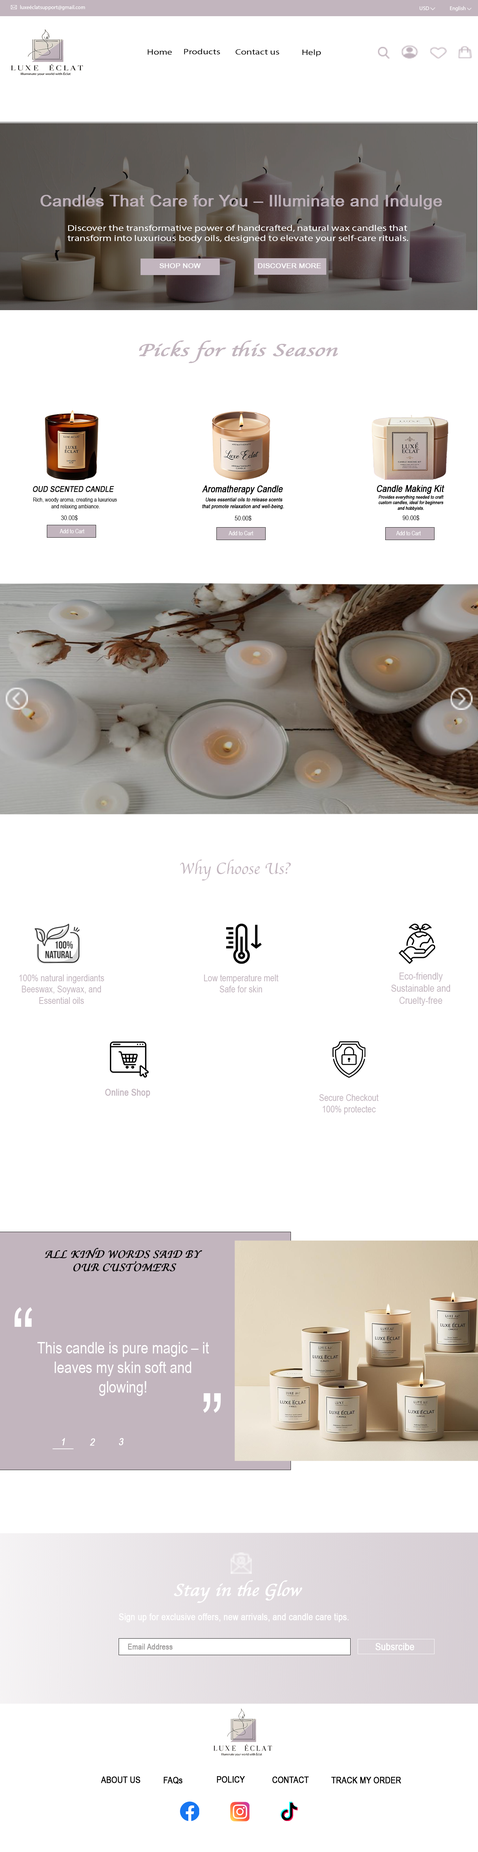
<style>
.page{position:relative;width:478px;height:1852px;background:#ffffff}
.page>*{position:absolute;margin:0}
.t1{font:5.4px "MyriadPro-Regular";color:#fefefe}
.t2{font:5.4px "MyriadPro-Regular";color:#ffffff}
.t3{font:7.8px "MyriadPro-Regular";color:#010101;scale:1.27 1}
.t4{font:7.8px "MyriadPro-Regular";color:#000000;scale:1.27 1}
.t5{font:15.9px "ArialNarrow";color:#beb1ba;font-weight:bold;scale:1.27 1}
.t6{font:8.6px "MyriadPro-Regular";color:#fffeff;scale:1.27 1}
.t7{font:6.9px "ArialNarrow";color:#fefefe;font-weight:bold;scale:1.27 1}
.t8{font:17.6px "Apple-Chancery";color:#c2b5be;font-weight:bold;font-style:italic;scale:1.27 1}
.t9{font:9.4px "ArialNarrow";color:#000000;font-weight:bold;font-style:italic}
.t10{font:8.1px "ArialNarrow";color:#000000;font-weight:bold;font-style:italic}
.t11{font:5.8px "ArialNarrow";color:#000000}
.t12{font:5.4px "ArialNarrow";color:#000000;font-weight:bold;font-style:italic}
.t13{font:4.7px "ArialNarrow";color:#000000;font-weight:bold;font-style:italic}
.t14{font:6.7px "ArialNarrow";color:#000000}
.t15{font:5.9px "ArialNarrow";color:#ffffff}
.t16{font:16.2px "Apple-Chancery";color:#c2b5be}
.t17{font:9.4px "ArialNarrow";color:#c2b5be}
.t18{font:10.1px "ArialNarrow";color:#c2b5be}
.t19{font:9.4px "ArialNarrow";color:#c2b5be;font-weight:bold}
.t20{font:10.8px "Apple-Chancery";color:#000000;font-weight:bold;font-style:italic}
.t21{font:84.3px "ArialNarrow";color:#ffffff}
.t22{font:16.2px "ArialNarrow";color:#ffffff}
.t23{font:10.1px "ArialNarrow";color:#ffffff;font-weight:bold;font-style:italic}
.t24{font:17.6px "Apple-Chancery";color:#ffffff;font-weight:bold;font-style:italic}
.t25{font:9.4px "ArialNarrow";color:#ffffff;font-weight:bold}
.t26{font:8.1px "ArialNarrow";color:#9b9999;font-weight:bold}
.t27{font:10.1px "ArialNarrow";color:#ffffff;font-weight:bold}
.t28{font:9px "ArialNarrow";color:#000000;font-weight:bold}
</style>
<div class="page">
<p class="t1" style="left:20px;top:5px;width:65px;height:5px">luxeéclatsupport@gmail.com</p>
<p class="t2" style="left:420px;top:6px;width:9px;height:4px">USD</p>
<p class="t2" style="left:450px;top:6px;width:15px;height:5px">English</p>
<p class="t3" style="left:148px;top:49px;width:24px;height:6px">Home</p>
<p class="t4" style="left:184px;top:49px;width:36px;height:6px">Products</p>
<p class="t4" style="left:236px;top:49px;width:43px;height:6px">Contact us</p>
<p class="t4" style="left:302px;top:49px;width:19px;height:8px">Help</p>
<p class="t5" style="left:40px;top:195px;width:402px;height:15px">Candles That Care for You – Illuminate and Indulge</p>
<p class="t6" style="left:67px;top:225px;width:341px;height:18px">Discover the transformative power of handcrafted, natural wax candles that transform into luxurious body oils, designed to elevate your self-care rituals.</p>
<p class="t7" style="left:159px;top:263px;width:42px;height:5px">SHOP NOW</p>
<p class="t7" style="left:258px;top:263px;width:63px;height:5px">DISCOVER MORE</p>
<p class="t8" style="left:139px;top:340px;width:199px;height:23px">Picks for this Season</p>
<p class="t9" style="left:202px;top:485px;width:81px;height:9px">Aromatherapy Candle</p>
<p class="t9" style="left:377px;top:485px;width:67px;height:9px">Candle Making Kit</p>
<p class="t10" style="left:33px;top:486px;width:81px;height:6px">OUD SCENTED CANDLE</p>
<p class="t11" style="left:33px;top:497px;width:84px;height:12px;text-align:center">Rich, woody aroma, creating a luxurious <br>and relaxing ambiance.</p>
<p class="t12" style="left:202px;top:497px;width:82px;height:12px;text-align:center">Uses essential oils to release scents that promote relaxation and well-being.</p>
<p class="t13" style="left:379px;top:495px;width:65px;height:16px;text-align:center">Provides everything needed to craft custom candles, ideal for beginners and hobbyists.</p>
<p class="t14" style="left:61px;top:515px;width:17px;height:6px">30.00$</p>
<p class="t14" style="left:235px;top:515px;width:16px;height:6px">50.00$</p>
<p class="t14" style="left:402px;top:515px;width:17px;height:6px">90.00$</p>
<p class="t15" style="left:60px;top:529px;width:25px;height:4px">Add to Cart</p>
<p class="t15" style="left:229px;top:531px;width:24px;height:4px">Add to Cart</p>
<p class="t15" style="left:396px;top:531px;width:25px;height:4px">Add to Cart</p>
<p class="t16" style="left:180px;top:859px;width:111px;height:21px">Why Choose Us?</p>
<p class="t17" style="left:19px;top:974px;width:85px;height:30px;text-align:center">100% natural ingerdiants <br>Beeswax, Soywax, and Essential oils</p>
<p class="t17" style="left:204px;top:974px;width:74px;height:18px;text-align:center">Low temperature melt <br>Safe for skin</p>
<p class="t18" style="left:391px;top:972px;width:59px;height:34px;text-align:center">Eco-friendly <br>Sustainable and Cruelty-free</p>
<p class="t19" style="left:105px;top:1089px;width:45px;height:9px">Online Shop</p>
<p class="t17" style="left:319px;top:1094px;width:60px;height:20px;text-align:center">Secure Checkout <br>100% protectec</p>
<p class="t20" style="left:45px;top:1248px;width:157px;height:23px;text-align:center">ALL KIND WORDS SAID BY<br> OUR CUSTOMERS</p>
<p class="t21" style="left:14px;top:1307px;width:18px;height:20px">“</p>
<p class="t22" style="left:37px;top:1342px;width:172px;height:54px;text-align:center">This candle is pure magic – it leaves my skin soft and glowing!</p>
<p class="t21" style="left:203px;top:1393px;width:18px;height:20px;rotate:180deg">“</p>
<p class="t23" style="left:62px;top:1438px;width:3px;height:7px">1</p>
<p class="t23" style="left:90px;top:1438px;width:5px;height:8px">2</p>
<p class="t23" style="left:119px;top:1438px;width:5px;height:7px">3</p>
<p class="t24" style="left:174px;top:1580px;width:128px;height:23px">Stay in the Glow</p>
<p class="t25" style="left:119px;top:1613px;width:230px;height:9px">Sign up for exclusive offers, new arrivals, and candle care tips.</p>
<p class="t26" style="left:128px;top:1643px;width:45px;height:7px">Email Address</p>
<p class="t27" style="left:375px;top:1643px;width:39px;height:7px">Subsrcibe</p>
<p class="t28" style="left:101px;top:1776px;width:39px;height:7px">ABOUT US</p>
<p class="t28" style="left:163px;top:1777px;width:19px;height:7px">FAQs</p>
<p class="t28" style="left:217px;top:1776px;width:28px;height:7px">POLICY</p>
<p class="t28" style="left:272px;top:1776px;width:37px;height:7px">CONTACT</p>
<p class="t28" style="left:331px;top:1777px;width:70px;height:6px">TRACK MY ORDER</p>
</div>
